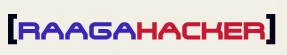
<style>
.page{position:relative;width:287px;height:55px;background:#f2f0e4}
.page>*{position:absolute;margin:0}
.t1{font:26.6px "TerminatorTwo";color:#c81633;scale:1.13 1}
.t2{font:31.9px "TerminatorTwo";color:#02021a;scale:1.13 1}
.t3{font:26.6px "TerminatorTwo";color:#3b26ba;scale:1.13 1}
</style>
<div class="page">
<p class="t1" style="left:8px;top:14px;width:268px;height:31px"><span class="t2">[</span><span class="t3">RAAGA</span>HACKER<span class="t2">]</span></p>
</div>
